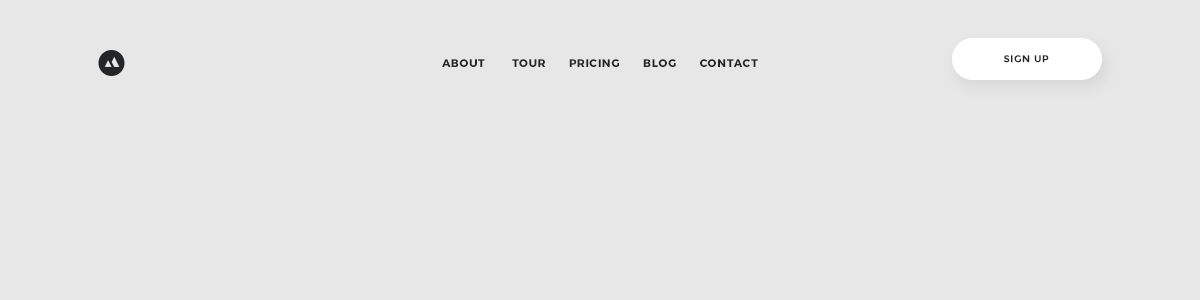
<style>
.page{position:relative;width:1200px;height:300px;background:#e7e7e7}
.page>*{position:absolute;margin:0}
.t1{font:11px "Montserrat-Bold";letter-spacing:0.07em;color:#242526;text-transform:uppercase}
.t2{font:10px "Montserrat-Bold";letter-spacing:0.05em;color:#242526;text-transform:uppercase}
</style>
<div class="page">
<p class="t1" style="left:442px;top:59px;width:316px;height:8px">About       Tour      Pricing      Blog      Contact</p>
<p class="t2" style="left:1004px;top:55px;width:45px;height:8px">sign up</p>
</div>
